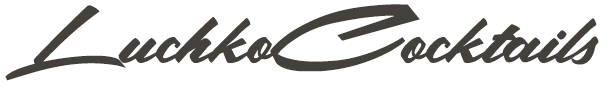
<style>
.page{position:relative;width:616px;height:88px;background:#ffffff}
.page>*{position:absolute;margin:0}
.t1{font:116.8px "Christopher";color:#44403c}
</style>
<div class="page">
<p class="t1" style="left:5px;top:4px;width:594px;height:77px">LuchkoCocktails</p>
</div>
